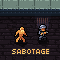
<style>
.page{position:relative;width:60px;height:60px;background:#1f171e}
.page>*{position:absolute;margin:0}
.t1{font:8px "04b03"}
</style>
<div class="page">
<p class="t1" style="left:12px;top:49px;width:37px;height:5px">SABOTAGE</p>
</div>
